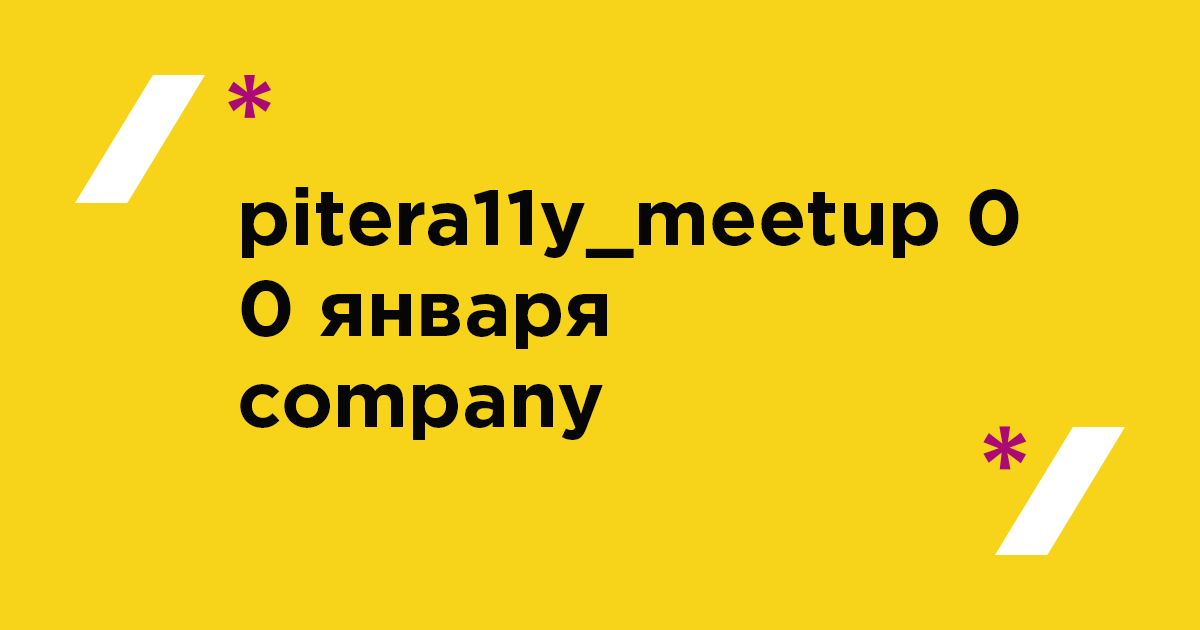
<style>
.page{position:relative;width:1200px;height:630px;background:#f7d419}
.page>*{position:absolute;margin:0}
.t1{font:79px/91px "GothamPro-Bold";color:#060606}
</style>
<div class="page">
<p class="t1" style="left:240px;top:187px;width:779px;height:253px">pitera11y_meetup 0<br>0 января<br>company</p>
</div>
